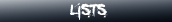
<style>
.page{position:relative;width:172px;height:22px}
.page>*{position:absolute;margin:0}
.t1{font:25px "YouMurdererBB";color:#ffffff}
</style>
<div class="page">
<p class="t1" style="left:70px;top:3px;width:38px;height:17px">Lists</p>
</div>
